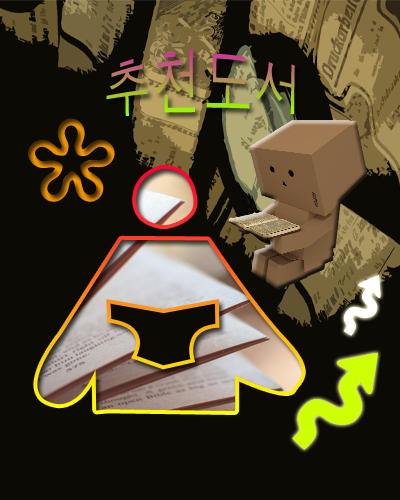
<style>
.page{position:relative;width:400px;height:500px;background:#0c0a05}
.page>*{position:absolute;margin:0}
.t1{font:50px "Dotum"}
</style>
<div class="page">
<p class="t1" style="left:106px;top:49px;width:189px;height:67px">추천도서</p>
</div>
